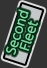
<style>
.page{position:relative;width:47px;height:68px;background:#333333}
.page>*{position:absolute;margin:0}
.t1{font:12px/12px "UDShinGoPro-Light";color:#83d6a2;font-weight:bold}
</style>
<div class="page">
<p class="t1" style="left:6px;top:9px;width:32px;height:46px;text-align:center;rotate:-72deg">Second<br>Fleet</p>
</div>
